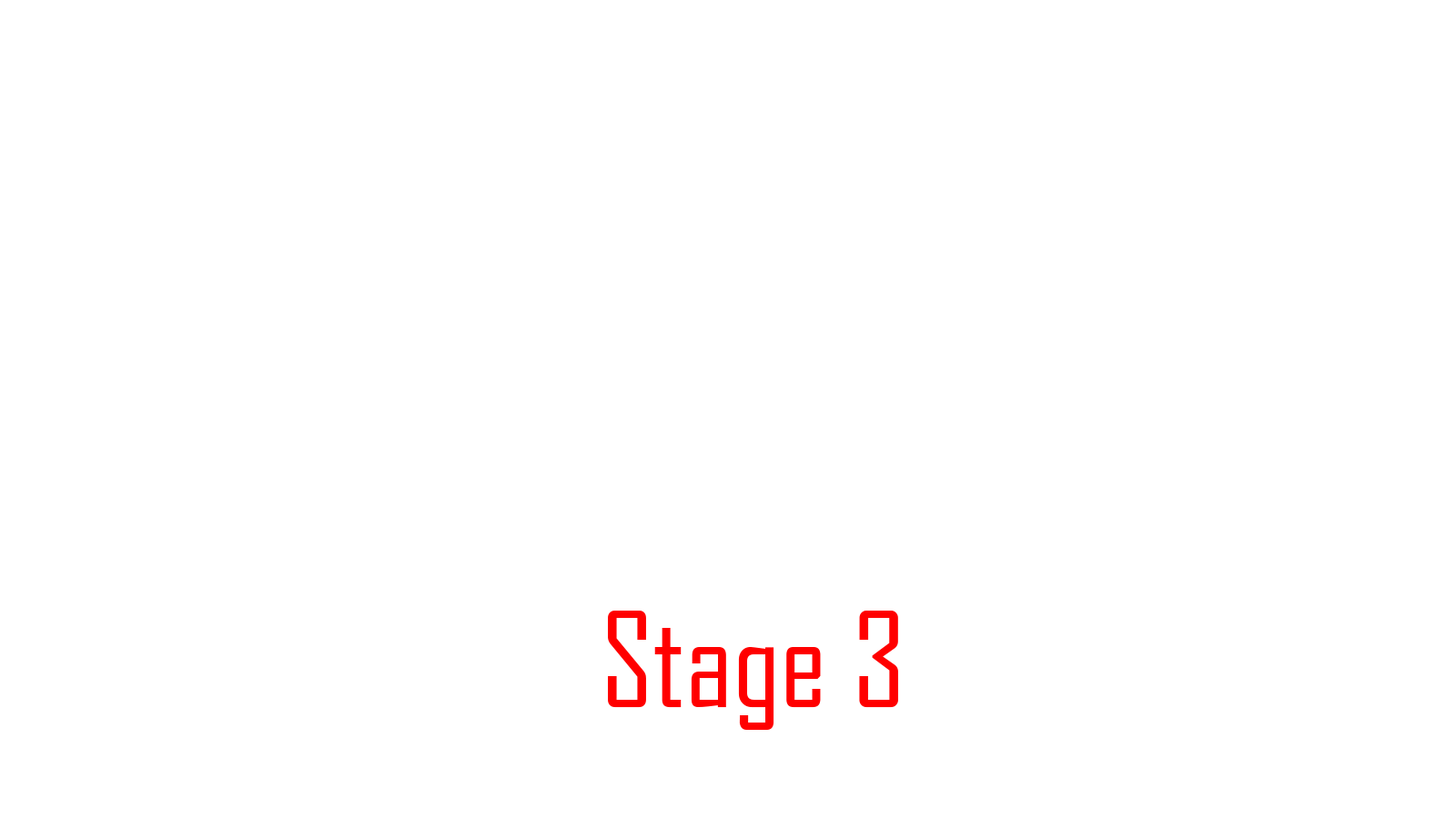
<style>
.page{position:relative;width:1456px;height:819px;background:#ffffff}
.page>*{position:absolute;margin:0}
.t1{font:126.2px "AgencyFB-Reg";color:#ff0000}
</style>
<div class="page">
<p class="t1" style="left:608px;top:611px;width:290px;height:119px">Stage 3</p>
</div>
